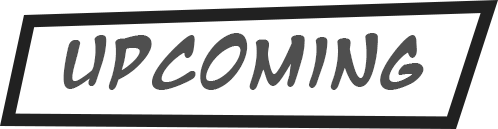
<style>
.page{position:relative;width:498px;height:129px;background:#ffffff}
.page>*{position:absolute;margin:0}
.t1{font:57.3px "MangaTempleBold";color:#4f4f4f}
</style>
<div class="page">
<p class="t1" style="left:63px;top:33px;width:361px;height:57px">Upcoming</p>
</div>
